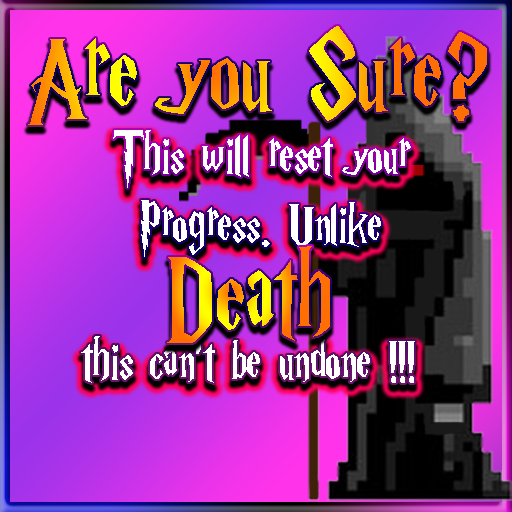
<style>
.page{position:relative;width:512px;height:512px}
.page>*{position:absolute;margin:0}
.t1{font:123.9px "HarryP";scale:0.86 1}
.t2{font:60.4px/68.8px "HarryP";color:#ffffff;scale:0.86 1}
</style>
<div class="page">
<p class="t1" style="left:28px;top:26px;width:459px;height:99px">Are you Sure?</p>
<p class="t2" style="left:81px;top:130px;width:334px;height:253px;text-align:center">This will reset your<br>Progress. Unlike<br> <br>this can’t be undone !!!</p>
<p class="t1" style="left:167px;top:246px;width:163px;height:97px">Death</p>
</div>
